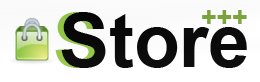
<style>
.page{position:relative;width:260px;height:82px;background:#ffffff}
.page>*{position:absolute;margin:0}
.t1{font:74.7px "Arial-BoldMT"}
.t2{font:74.7px "Arial-BoldMT";color:#000000}
.t3{font:26.7px "Arial-BoldMT";color:#77a335}
</style>
<div class="page">
<p class="t1" style="left:55px;top:12px;width:45px;height:56px">S</p>
<p class="t2" style="left:61px;top:12px;width:186px;height:56px">Store</p>
<p class="t3" style="left:202px;top:10px;width:45px;height:14px">+++</p>
</div>
